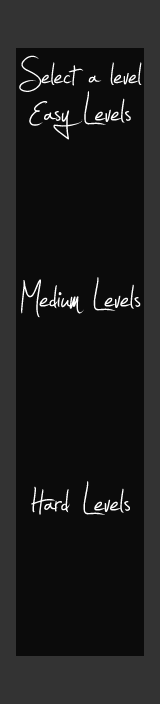
<style>
.page{position:relative;width:160px;height:704px;background:#0b0b0b}
.page>*{position:absolute;margin:0}
.t1{font:66px "Jellyka---Estrya's-Handwriting";color:#ffffff}
.t2{font:70px "Jellyka---Estrya's-Handwriting";color:#ffffff}
</style>
<div class="page">
<p class="t1" style="left:19px;top:55px;width:123px;height:37px">Select a level</p>
<p class="t2" style="left:29px;top:91px;width:102px;height:49px">Easy Levels</p>
<p class="t2" style="left:21px;top:277px;width:120px;height:41px">Medium Levels</p>
<p class="t2" style="left:31px;top:481px;width:99px;height:34px">Hard Levels</p>
</div>
